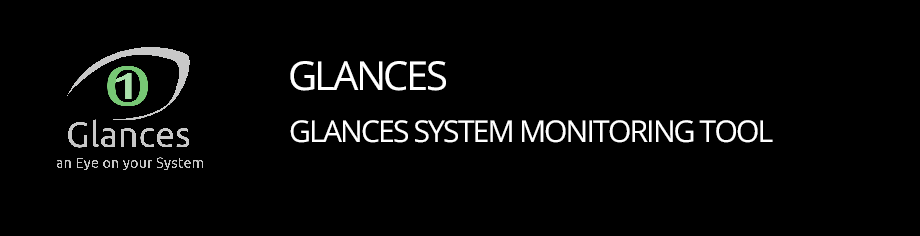
<style>
.page{position:relative;width:920px;height:236px;background:#000000}
.page>*{position:absolute;margin:0}
.t1{font:40px "OpenSansHebrew-Regular";letter-spacing:-0.06em;color:#ffffff;text-transform:uppercase}
.t2{font:30px "OpenSansHebrew-Regular";letter-spacing:-0.06em;color:#ffffff;text-transform:uppercase}
</style>
<div class="page">
<p class="t1" style="left:290px;top:61px;width:156px;height:30px">glances</p>
<p class="t2" style="left:290px;top:120px;width:483px;height:23px">Glances system monitoring tool</p>
</div>
